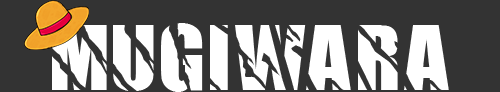
<style>
.page{position:relative;width:500px;height:92px;background:#333333}
.page>*{position:absolute;margin:0}
.t1{font:61.8px "Insomnia-Regular";letter-spacing:0.022em;color:#ffffff}
</style>
<div class="page">
<p class="t1" style="left:52px;top:23px;width:397px;height:69px">MUGIWARA</p>
</div>
